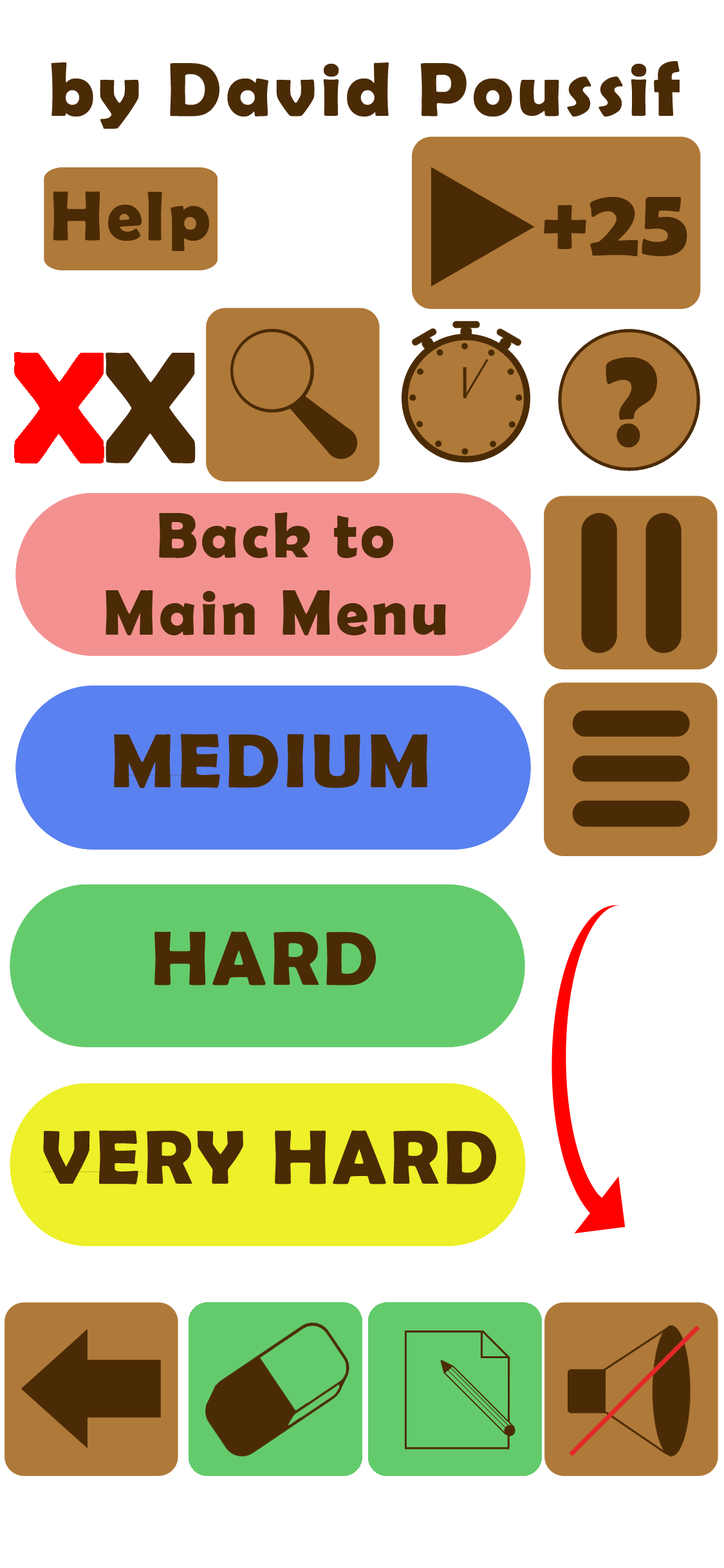
<style>
.page{position:relative;width:724px;height:1568px;background:#ffffff}
.page>*{position:absolute;margin:0}
.t1{font:77.2px "BerlinSansFBDemi-Bold";letter-spacing:0.05em;color:#4b2b05}
.t2{font:70.8px "BerlinSansFBDemi-Bold";letter-spacing:0.05em;color:#4b2b05}
.t3{font:64.4px "BerlinSansFBDemi-Bold";letter-spacing:0.05em;color:#4b2b05}
</style>
<div class="page">
<p class="t1" style="left:51px;top:61px;width:629px;height:68px">by David Poussif</p>
<p class="t2" style="left:53px;top:191px;width:156px;height:60px">Help</p>
<p class="t3" style="left:106px;top:512px;width:340px;height:123px;text-align:center">Back to<br>Main Menu</p>
<p class="t1" style="left:114px;top:734px;width:313px;height:55px">MEDIUM</p>
<p class="t1" style="left:154px;top:931px;width:222px;height:54px">HARD</p>
<p class="t1" style="left:43px;top:1130px;width:453px;height:54px">VERY HARD</p>
</div>
